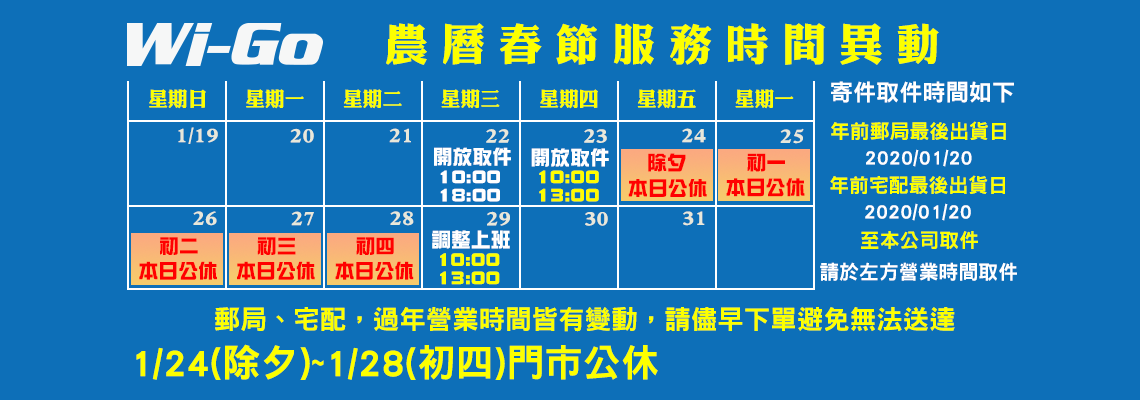
<style>
.page{position:relative;width:1140px;height:400px;background:#0d6fb8}
.page>*{position:absolute;margin:0}
.t1{font:43.7px "DFLiKingHei-W8-WINP-BF";letter-spacing:0.3em;color:#fcff00}
.t2{font:19.9px "DFLiKingHei-W8-WINP-BF";color:#fcff00}
.t3{font:23.2px "DFNHei-W9-WINP-BF";color:#ffffff}
.t4{font:19.9px "DFNHei-W9-WINP-BF";color:#fcff00}
.t5{font:19.9px "DFLiKingHei-W8-WINP-BF";color:#e8e8da}
.t6{font:19.9px "DFZongYi-W9-WINP-BF";color:#ffffff}
.t7{font:19.9px "DFNHei-W9-WINP-BF";color:#fefefe}
.t8{font:19.9px "DFZongYi-W9-WINP-BF";color:#ff0000}
.t9{font:19.9px/18.2px "DFZongYi-W9-WINP-BF";color:#ffffff}
.t10{font:19.9px/18.2px "DFZongYi-W9-WINP-BF";color:#fffc00}
.t11{font:19.9px/18.2px "DFZongYi-W9-WINP-BF";color:#fcff00}
.t12{font:19.9px "DFNHei-W9-WINP-BF";color:#ffffff}
.t13{font:26.5px "DFNHei-W9-WINP-BF";color:#fcff00}
.t14{font:38.2px "DFNHei-W9-WINP-BF";color:#fcff00}
</style>
<div class="page">
<p class="t1" style="left:386px;top:23px;width:553px;height:42px">農曆春節服務時間異動</p>
<p class="t2" style="left:149px;top:89px;width:57px;height:20px">星期日</p>
<p class="t2" style="left:246px;top:89px;width:58px;height:20px">星期一</p>
<p class="t2" style="left:343px;top:89px;width:59px;height:20px">星期二</p>
<p class="t2" style="left:441px;top:89px;width:59px;height:20px">星期三</p>
<p class="t2" style="left:540px;top:89px;width:58px;height:20px">星期四</p>
<p class="t2" style="left:637px;top:89px;width:59px;height:20px">星期五</p>
<p class="t2" style="left:735px;top:89px;width:59px;height:20px">星期一</p>
<p class="t3" style="left:831px;top:81px;width:183px;height:22px">寄件取件時間如下</p>
<p class="t4" style="left:831px;top:121px;width:175px;height:19px">年前郵局最後出貨日</p>
<p class="t5" style="left:178px;top:127px;width:40px;height:17px">1/19</p>
<p class="t5" style="left:290px;top:128px;width:24px;height:15px">20</p>
<p class="t5" style="left:389px;top:128px;width:22px;height:15px">21</p>
<p class="t5" style="left:486px;top:129px;width:24px;height:14px">22</p>
<p class="t5" style="left:584px;top:129px;width:23px;height:14px">23</p>
<p class="t5" style="left:682px;top:128px;width:24px;height:15px">24</p>
<p class="t5" style="left:780px;top:128px;width:24px;height:16px">25</p>
<p class="t6" style="left:434px;top:147px;width:77px;height:19px">開放取件</p>
<p class="t6" style="left:531px;top:148px;width:78px;height:19px">開放取件</p>
<p class="t7" style="left:866px;top:149px;width:106px;height:18px">2020/01/20</p>
<p class="t8" style="left:648px;top:153px;width:38px;height:19px">除夕</p>
<p class="t8" style="left:747px;top:153px;width:38px;height:19px">初一</p>
<p class="t9" style="left:440px;top:170px;width:60px;height:32px">10:00<br>18:00</p>
<p class="t10" style="left:539px;top:170px;width:60px;height:32px">10:00<br>13:00</p>
<p class="t8" style="left:628px;top:179px;width:79px;height:18px">本日公休</p>
<p class="t8" style="left:726px;top:178px;width:79px;height:19px">本日公休</p>
<p class="t4" style="left:830px;top:175px;width:175px;height:19px">年前宅配最後出貨日</p>
<p class="t7" style="left:865px;top:203px;width:106px;height:18px">2020/01/20</p>
<p class="t5" style="left:193px;top:211px;width:24px;height:15px">26</p>
<p class="t5" style="left:291px;top:211px;width:23px;height:15px">27</p>
<p class="t5" style="left:390px;top:211px;width:24px;height:15px">28</p>
<p class="t5" style="left:487px;top:211px;width:23px;height:15px">29</p>
<p class="t5" style="left:585px;top:212px;width:23px;height:14px">30</p>
<p class="t5" style="left:683px;top:211px;width:22px;height:15px">31</p>
<p class="t6" style="left:432px;top:230px;width:78px;height:19px">調整上班</p>
<p class="t4" style="left:861px;top:231px;width:117px;height:18px">至本公司取件</p>
<p class="t8" style="left:160px;top:237px;width:38px;height:18px">初二</p>
<p class="t8" style="left:257px;top:237px;width:39px;height:18px">初三</p>
<p class="t8" style="left:356px;top:237px;width:38px;height:18px">初四</p>
<p class="t11" style="left:440px;top:253px;width:60px;height:32px">10:00<br>13:00</p>
<p class="t8" style="left:139px;top:261px;width:78px;height:19px">本日公休</p>
<p class="t8" style="left:237px;top:261px;width:78px;height:19px">本日公休</p>
<p class="t8" style="left:335px;top:261px;width:79px;height:19px">本日公休</p>
<p class="t12" style="left:820px;top:262px;width:197px;height:19px">請於左方營業時間取件</p>
<p class="t13" style="left:215px;top:307px;width:740px;height:25px">郵局、宅配，過年營業時間皆有變動，請儘早下單避免無法送達</p>
<p class="t14" style="left:136px;top:344px;width:522px;height:36px">1/24(除夕)~1/28(初四)門市公休</p>
</div>
